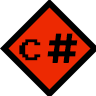
<style>
.page{position:relative;width:96px;height:96px;background:#ffffff}
.page>*{position:absolute;margin:0}
.t1{font:72px "ArcadeClassic";letter-spacing:0.1em;color:#000000;text-transform:uppercase}
.t2{font:72px "Montserrat-Bold";letter-spacing:0.1em;color:#000000;text-transform:uppercase}
</style>
<div class="page">
<p class="t1" style="left:19px;top:33px;width:59px;height:30px">C<span class="t2">#</span></p>
</div>
